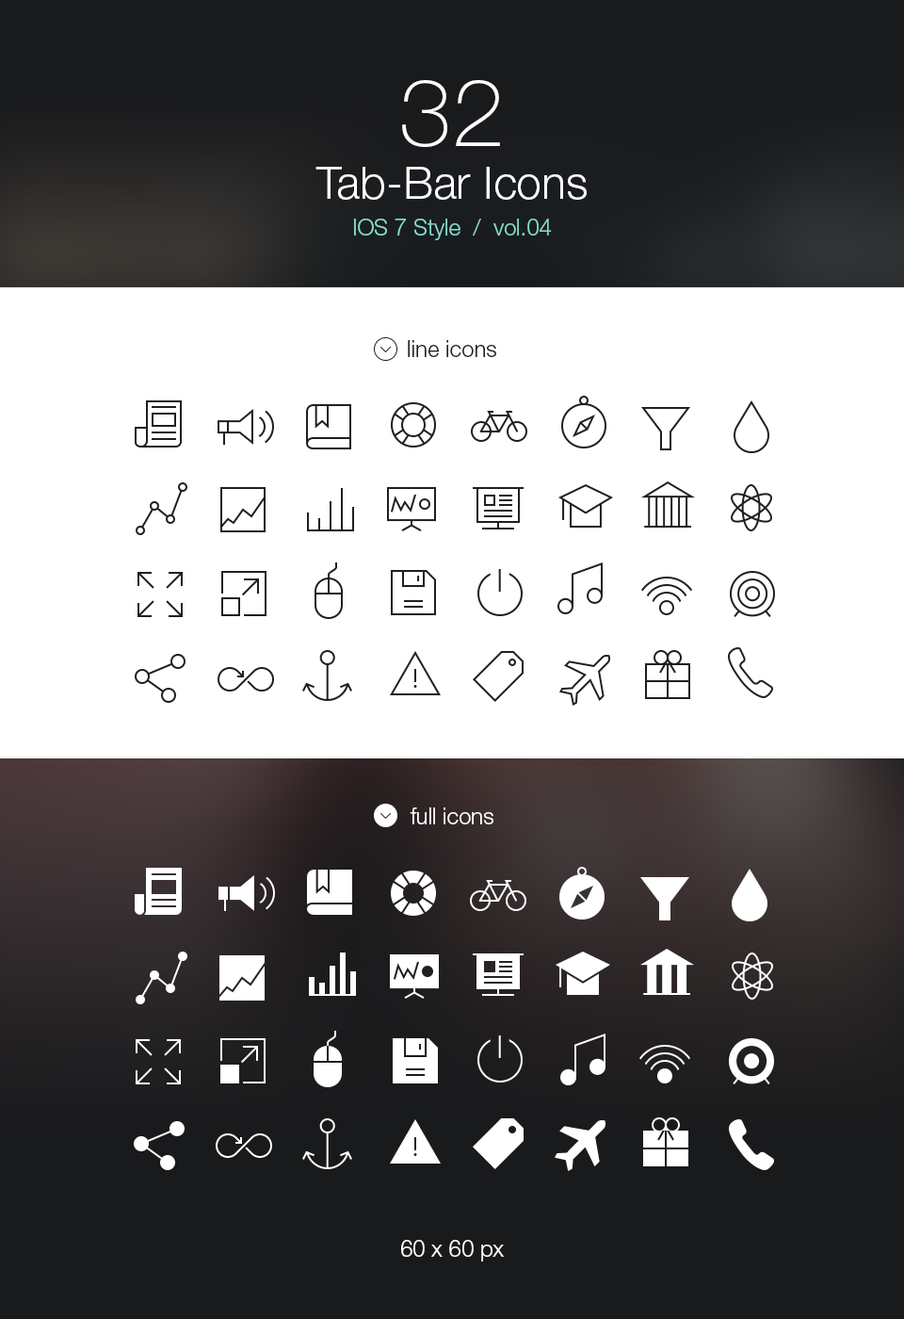
<style>
.page{position:relative;width:904px;height:1319px;background:#ffffff}
.page>*{position:absolute;margin:0}
.t1{font:22.6px/36.7px "HelveticaNeueLTStd-Lt";color:#85dac7}
.t2{font:94.2px/47.1px "HelveticaNeueLTStd-Th";color:#ffffff}
.t3{font:45.2px/52.7px "HelveticaNeueLTStd-Lt";color:#ffffff}
.t4{font:22.6px "HelveticaNeueLTStd-Lt";color:#1c2021}
.t5{font:22.6px "HelveticaNeueLTStd-Lt";color:#ffffff}
</style>
<div class="page">
<p class="t1" style="left:316px;top:80px;width:271px;height:160px;text-align:center"><span class="t2">32<br></span><span class="t3">Tab-Bar Icons<br></span>IOS 7 Style  /  vol.04</p>
<p class="t4" style="left:408px;top:340px;width:88px;height:17px">line icons</p>
<p class="t5" style="left:410px;top:807px;width:84px;height:17px">full icons</p>
<p class="t5" style="left:401px;top:1240px;width:103px;height:21px">60 x 60 px</p>
</div>
